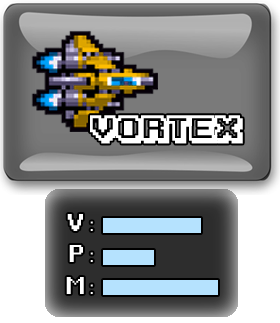
<style>
.page{position:relative;width:280px;height:323px}
.page>*{position:absolute;margin:0}
.t1{font:29px "KarmaticArcade";color:#ffffff}
.t2{font:60px "Game-Over";color:#ffffff}
.t3{font:60px "Game-Over";color:#fefefe}
</style>
<div class="page">
<p class="t1" style="left:90px;top:115px;width:153px;height:29px">vortex</p>
<p class="t2" style="left:67px;top:214px;width:26px;height:17px">V :</p>
<p class="t3" style="left:69px;top:245px;width:24px;height:17px">P :</p>
<p class="t3" style="left:66px;top:277px;width:27px;height:17px">M :</p>
</div>
